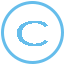
<style>
.page{position:relative;width:64px;height:64px;background:#ffffff}
.page>*{position:absolute;margin:0}
.t1{font:34.3px "HarmonyOS_Sans_SC";color:#65bdeb;scale:1.6 1}
</style>
<div class="page">
<p class="t1" style="left:17px;top:21px;width:31px;height:25px">C</p>
</div>
